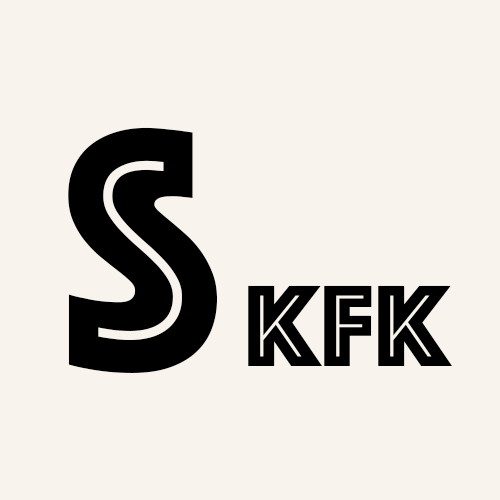
<style>
.page{position:relative;width:500px;height:500px;background:#f8f4ed}
.page>*{position:absolute;margin:0}
.t1{font:350px "Phosphate-Inline";color:#000000}
.t2{font:120px "Phosphate-Inline";color:#000000}
</style>
<div class="page">
<p class="t1" style="left:68px;top:127px;width:149px;height:246px">S</p>
<p class="t2" style="left:248px;top:285px;width:204px;height:81px">kfk</p>
</div>
